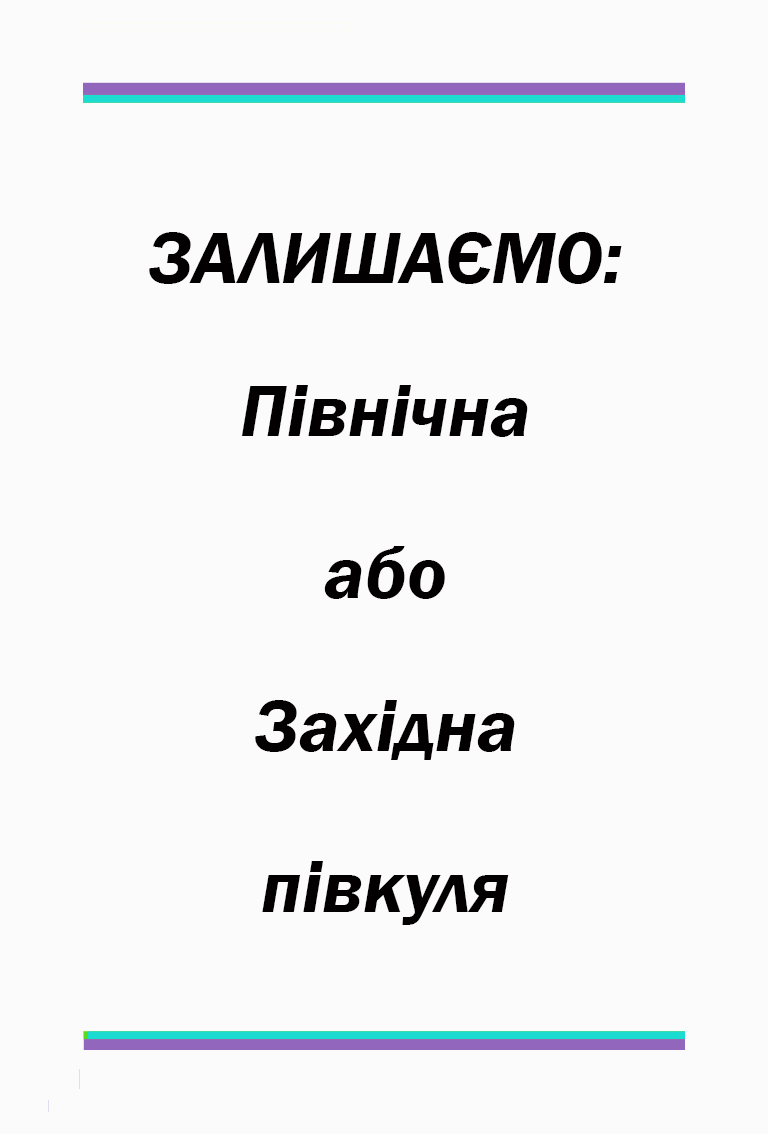
<style>
.page{position:relative;width:768px;height:1134px;background:#fbfbfb}
.page>*{position:absolute;margin:0}
.t1{font:75px "FranklinGothic-DemiItalic";color:#020000}
</style>
<div class="page">
<p class="t1" style="left:149px;top:232px;width:473px;height:52px">ЗАЛИШАЄМО:</p>
<p class="t1" style="left:241px;top:385px;width:287px;height:52px">Північна</p>
<p class="t1" style="left:324px;top:546px;width:121px;height:53px">або</p>
<p class="t1" style="left:255px;top:700px;width:260px;height:60px">Західна</p>
<p class="t1" style="left:262px;top:861px;width:247px;height:64px">півкуля</p>
</div>
